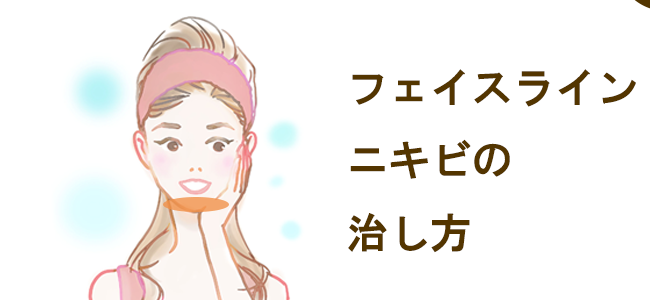
<style>
.page{position:relative;width:650px;height:300px;background:#ffffff}
.page>*{position:absolute;margin:0}
.t1{font:41.7px "HGGothicE";color:#533500}
</style>
<div class="page">
<p class="t1" style="left:348px;top:69px;width:288px;height:184px">フェイスライン<br>ニキビの<br>治し方</p>
</div>
